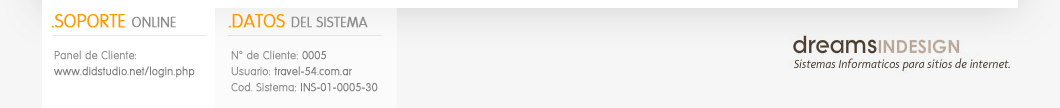
<style>
.page{position:relative;width:1060px;height:108px;background:#f6f6f6}
.page>*{position:absolute;margin:0}
.t1{font:18px "ElementarySF";color:#ff9900;font-weight:bold}
.t2{font:14px "ElementarySF";color:#909090;font-weight:bold}
.t3{font:11px/16px "ElementarySF";color:#7e7e7e;font-weight:bold}
.t4{font:11px/16px "ElementarySF";color:#909090;font-weight:bold}
</style>
<div class="page">
<p class="t1" style="left:51px;top:14px;width:125px;height:14px">.SOPORTE <span class="t2">ONLINE</span></p>
<p class="t2" style="left:228px;top:14px;width:140px;height:14px"><span class="t1">.DATOS </span>DEL SISTEMA</p>
<p class="t3" style="left:54px;top:50px;width:141px;height:28px"><span class="t4">Panel de Cliente:<br></span>www.didstudio.net/login.php</p>
<p class="t3" style="left:231px;top:50px;width:147px;height:42px"><span class="t4">N° de Cliente: </span>0005<br><span class="t4">Usuario: </span>travel-54.com.ar<br><span class="t4">Cod. Sistema: </span>INS-01-0005-30</p>
</div>
